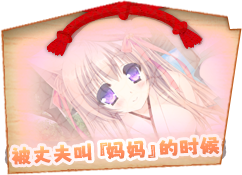
<style>
.page{position:relative;width:242px;height:175px}
.page>*{position:absolute;margin:0}
.t1{font:20px "MaokenAssortedSans";color:#ff9562;font-weight:bold}
.t2{font:20px "MaokenAssortedSans";letter-spacing:-0.2em;color:#ff9562;font-weight:bold}
</style>
<div class="page">
<p class="t1" style="left:11px;top:137px;width:209px;height:28px;rotate:-3deg">被丈夫叫<span class="t2">『</span>妈妈<span class="t2">』</span>的时候</p>
</div>
